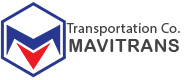
<style>
.page{position:relative;width:188px;height:80px;background:#ffffff}
.page>*{position:absolute;margin:0}
.t1{font:14px "MyriadPro-Regular";letter-spacing:0.025em;color:#444444}
.t2{font:18px "ArialRoundedMTBold";letter-spacing:0.025em;color:#444444}
</style>
<div class="page">
<p class="t1" style="left:66px;top:23px;width:114px;height:13px">Transportation Co.</p>
<p class="t2" style="left:69px;top:39px;width:110px;height:13px">MAVITRANS</p>
</div>
